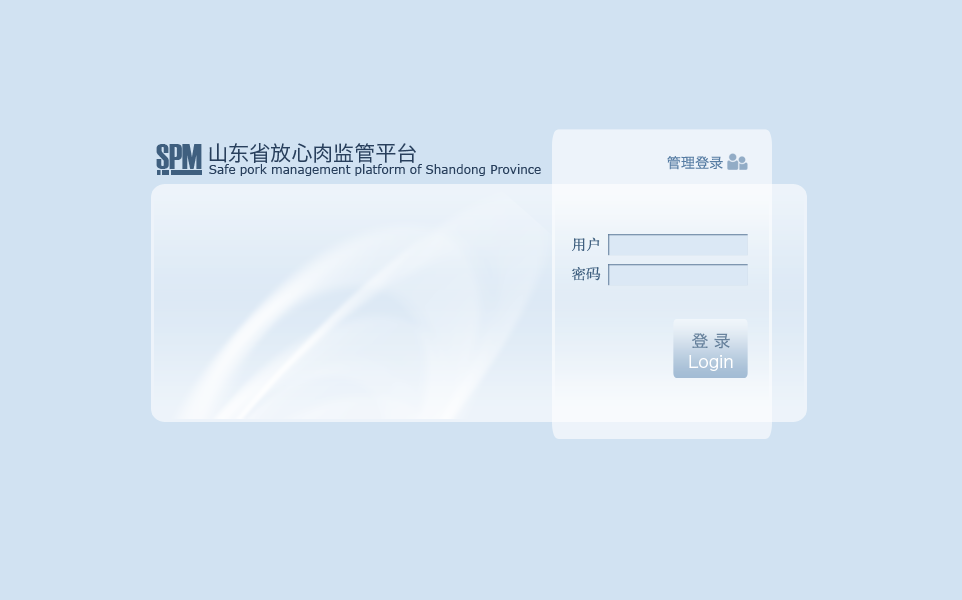
<style>
.page{position:relative;width:962px;height:600px;background:#d1e2f2}
.page>*{position:absolute;margin:0}
.t1{font:35.3px "Haettenschweiler";color:#3f5f7f}
.t2{font:21px "HiraginoSansGB-W3";color:#283f5c}
.t3{font:14.2px "HiraginoSansGB-W3";color:#567ca3}
.t4{font:12px "Verdana";color:#283f5c}
.t5{font:14.6px "HYa1gj";color:#3f5f7f}
.t6{font:16.7px "HiraginoSansGB-W3";color:#67819c}
.t7{font:16.7px "HiraginoSansGB-W3";color:#ffffff}
</style>
<div class="page">
<p class="t1" style="left:156px;top:144px;width:46px;height:25px">SPM</p>
<p class="t2" style="left:209px;top:143px;width:207px;height:20px">山东省放心肉监管平台</p>
<p class="t3" style="left:667px;top:156px;width:56px;height:14px">管理登录</p>
<p class="t4" style="left:209px;top:164px;width:332px;height:12px">Safe pork management platform of Shandong Province</p>
<p class="t5" style="left:572px;top:237px;width:28px;height:14px">用户</p>
<p class="t5" style="left:572px;top:267px;width:29px;height:14px">密码</p>
<p class="t6" style="left:692px;top:333px;width:38px;height:16px">登 录</p>
<p class="t7" style="left:689px;top:355px;width:44px;height:16px">Login</p>
</div>
